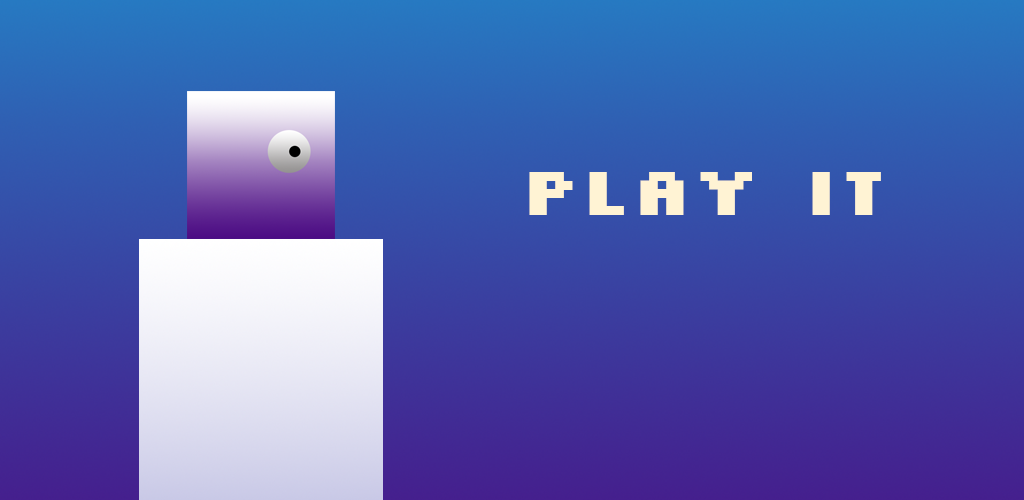
<style>
.page{position:relative;width:1024px;height:500px}
.page>*{position:absolute;margin:0}
.t1{font:72px "Silkscreen-Bold";color:#fff3d4}
</style>
<div class="page">
<p class="t1" style="left:529px;top:172px;width:352px;height:43px">Play It</p>
</div>
